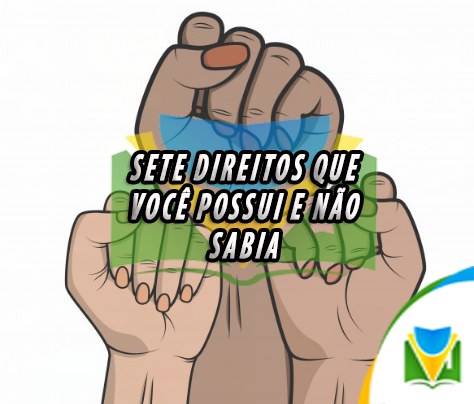
<style>
.page{position:relative;width:474px;height:404px}
.page>*{position:absolute;margin:0}
.t1{font:37.9px/38.9px "MyriadPro-BoldCondIt";letter-spacing:0.1em;color:#fdf8f8;text-transform:uppercase;font-weight:bold;font-style:italic;scale:0.7 1}
</style>
<div class="page">
<p class="t1" style="left:130px;top:154px;width:231px;height:105px;text-align:center">Sete direitos que você possui e não sabia</p>
</div>
